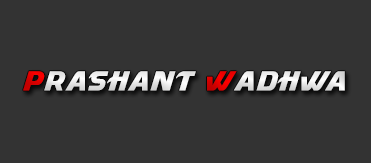
<style>
.page{position:relative;width:371px;height:163px;background:#333333}
.page>*{position:absolute;margin:0}
.t1{font:25.5px "Masque";letter-spacing:0.06em;color:#eae7e7}
</style>
<div class="page">
<p class="t1" style="left:23px;top:71px;width:322px;height:20px">PRASHANT wADHWA</p>
</div>
